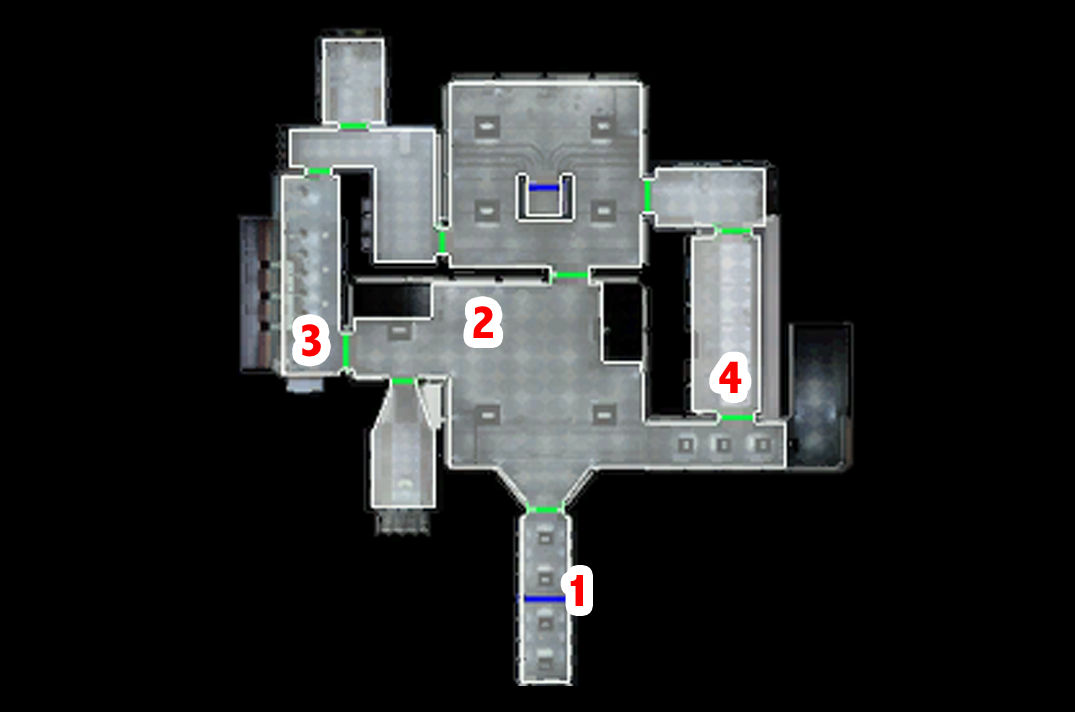
<style>
.page{position:relative;width:1075px;height:712px;background:#000000}
.page>*{position:absolute;margin:0}
.t1{font:48px "AbadiMT-CondensedExtraBold";color:#ff0000}
</style>
<div class="page">
<p class="t1" style="left:473px;top:306px;width:20px;height:32px">2</p>
<p class="t1" style="left:302px;top:324px;width:19px;height:33px">3</p>
<p class="t1" style="left:719px;top:361px;width:23px;height:32px">4</p>
<p class="t1" style="left:570px;top:575px;width:13px;height:31px">1</p>
</div>
